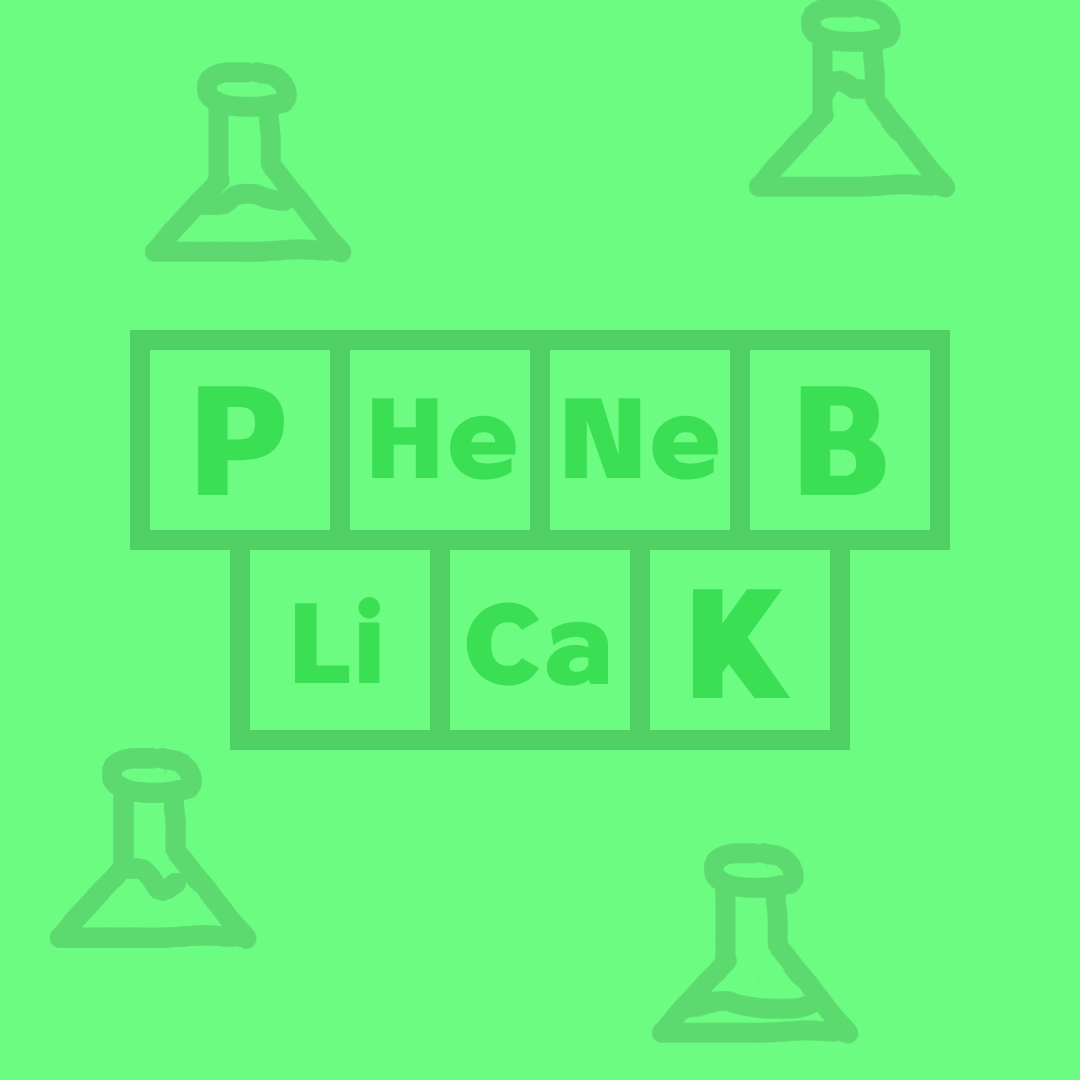
<style>
.page{position:relative;width:1080px;height:1080px;background:#6bfc81}
.page>*{position:absolute;margin:0}
.t1{font:150px "Stilu-Bold";color:#3bdf54}
.t2{font:110px "Stilu-Bold";color:#3bdf54}
</style>
<div class="page">
<p class="t1" style="left:198px;top:386px;width:86px;height:109px">P</p>
<p class="t1" style="left:800px;top:386px;width:86px;height:109px">B</p>
<p class="t2" style="left:372px;top:398px;width:145px;height:82px">He</p>
<p class="t2" style="left:565px;top:398px;width:154px;height:82px">Ne</p>
<p class="t1" style="left:693px;top:589px;width:98px;height:109px">K</p>
<p class="t2" style="left:295px;top:596px;width:86px;height:87px">Li</p>
<p class="t2" style="left:466px;top:602px;width:143px;height:84px">Ca</p>
</div>
